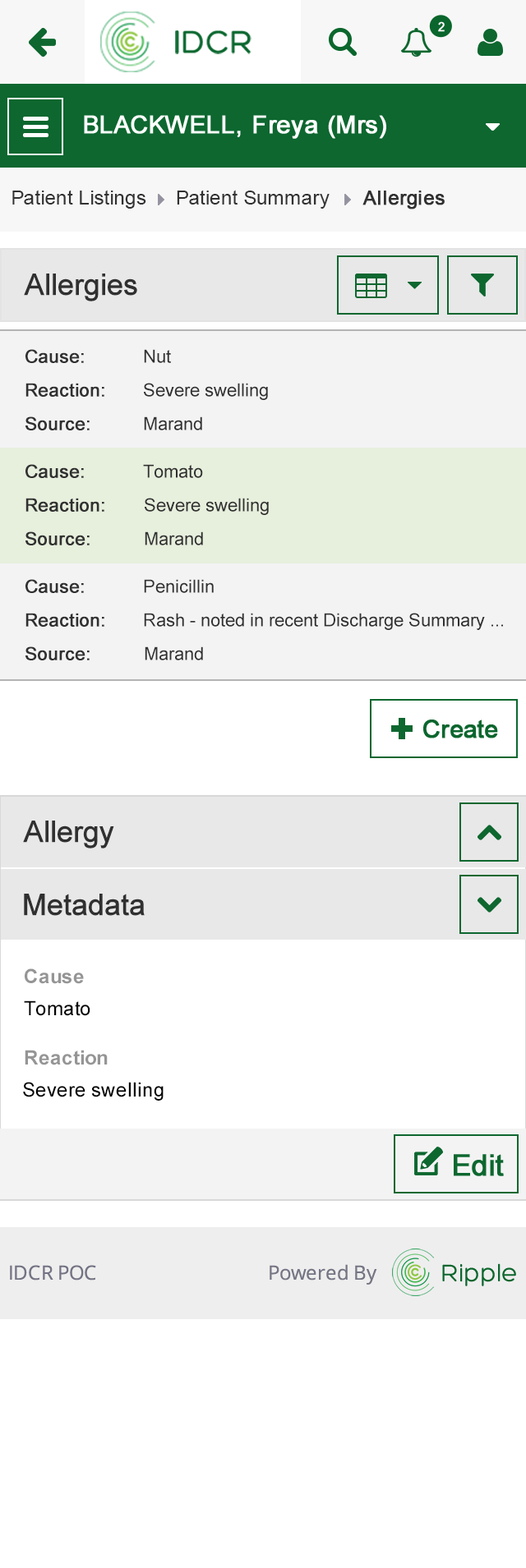
<style>
.page{position:relative;width:526px;height:1568px;background:#ffffff}
.page>*{position:absolute;margin:0}
.t1{font:19.7px "ArialMT";color:#313131}
.t2{font:19.7px "ArialMT";color:#313131;font-weight:bold}
.t3{font:29.6px "ArialMT";color:#303030;font-weight:bold}
.t4{font:18.1px "ArialMT";color:#303030;font-weight:bold}
.t5{font:18.1px "ArialMT";color:#303030}
.t6{font:19.7px "Arial-BoldMT";color:#959595}
.t7{font:19.7px "ArialMT";color:#000000}
</style>
<div class="page">
<p class="t1" style="left:12px;top:190px;width:134px;height:19px">Patient Listings</p>
<p class="t1" style="left:177px;top:190px;width:152px;height:19px">Patient Summary</p>
<p class="t2" style="left:362px;top:191px;width:82px;height:18px">Allergies</p>
<p class="t3" style="left:24px;top:274px;width:113px;height:27px">Allergies</p>
<p class="t4" style="left:25px;top:349px;width:59px;height:14px">Cause:</p>
<p class="t5" style="left:144px;top:349px;width:27px;height:14px">Nut</p>
<p class="t4" style="left:25px;top:383px;width:79px;height:14px">Reaction:</p>
<p class="t5" style="left:144px;top:383px;width:124px;height:17px">Severe swelling</p>
<p class="t4" style="left:25px;top:416px;width:65px;height:14px">Source:</p>
<p class="t5" style="left:144px;top:416px;width:58px;height:14px">Marand</p>
<p class="t4" style="left:25px;top:464px;width:59px;height:14px">Cause:</p>
<p class="t5" style="left:143px;top:464px;width:60px;height:14px">Tomato</p>
<p class="t4" style="left:25px;top:498px;width:79px;height:14px">Reaction:</p>
<p class="t5" style="left:145px;top:498px;width:124px;height:17px">Severe swelling</p>
<p class="t4" style="left:25px;top:531px;width:65px;height:14px">Source:</p>
<p class="t5" style="left:145px;top:531px;width:58px;height:14px">Marand</p>
<p class="t4" style="left:25px;top:579px;width:59px;height:14px">Cause:</p>
<p class="t5" style="left:144px;top:579px;width:70px;height:14px">Penicillin</p>
<p class="t4" style="left:25px;top:613px;width:79px;height:14px">Reaction:</p>
<p class="t5" style="left:144px;top:613px;width:359px;height:17px">Rash - noted in recent Discharge Summary ...</p>
<p class="t4" style="left:25px;top:646px;width:65px;height:14px">Source:</p>
<p class="t5" style="left:145px;top:646px;width:58px;height:14px">Marand</p>
<p class="t3" style="left:23px;top:821px;width:91px;height:27px">Allergy</p>
<p class="t3" style="left:24px;top:894px;width:121px;height:22px">Metadata</p>
<p class="t6" style="left:25px;top:968px;width:59px;height:16px">Cause</p>
<p class="t7" style="left:24px;top:1000px;width:66px;height:16px">Tomato</p>
<p class="t6" style="left:25px;top:1050px;width:83px;height:15px">Reaction</p>
<p class="t7" style="left:23px;top:1082px;width:140px;height:19px">Severe swelling</p>
</div>
